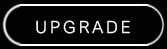
<style>
.page{position:relative;width:167px;height:49px;background:#020202}
.page>*{position:absolute;margin:0}
.t1{font:16.9px "ArialNova-Light";letter-spacing:0.18em;color:#ffffff}
</style>
<div class="page">
<p class="t1" style="left:36px;top:20px;width:94px;height:14px">UPGRADE</p>
</div>
